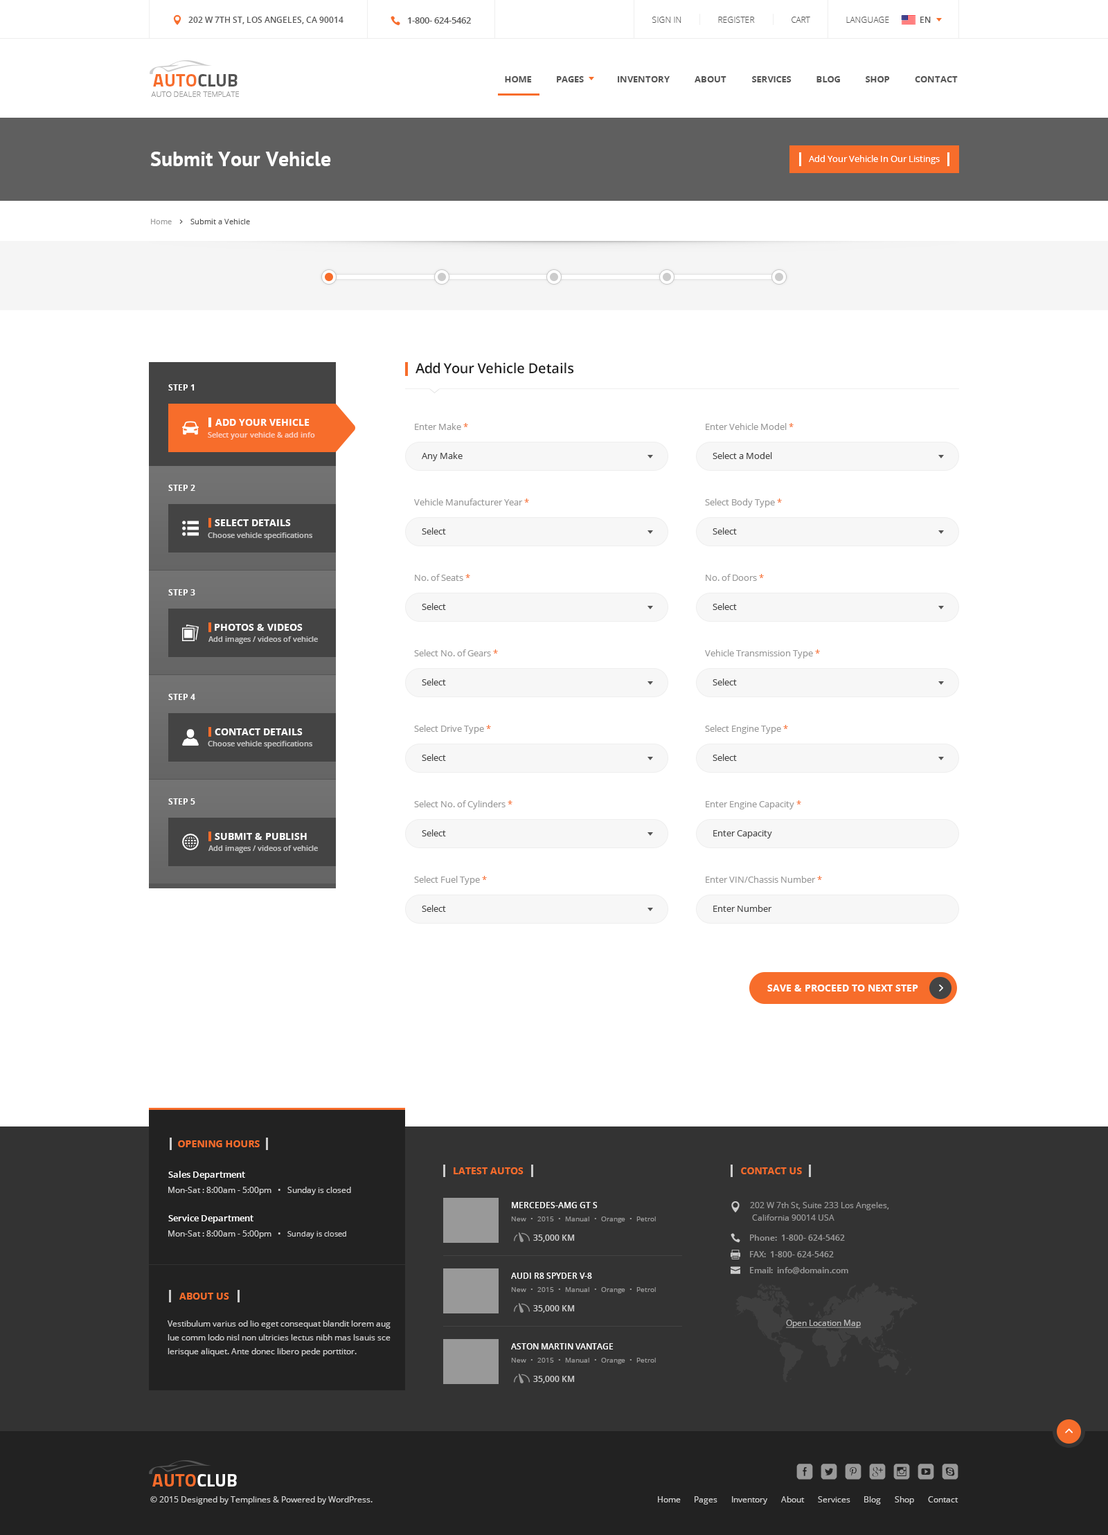
<style>
.page{position:relative;width:1108px;height:1535px;background:#ffffff}
.page>*{position:absolute;margin:0}
.t1{font:8.3px "OpenSans-Semibold";color:#555555}
.t2{font:9px "OpenSans-Semibold";color:#555555}
.t3{font:8.3px "OpenSans-Light";color:#555555}
.t4{font:18px "Titillium-Bold";color:#f76d2b}
.t5{font:18px "Titillium-Bold";color:#545454}
.t6{font:9px "OpenSans-Bold";color:#555555}
.t7{font:7.6px "OpenSans-Light";color:#999999}
.t8{font:20.8px "PTSans-Bold";color:#ffffff}
.t9{font:9px "OpenSans";color:#ffffff}
.t10{font:7.6px "OpenSans";color:#999999}
.t11{font:7.6px "OpenSans";color:#545454}
.t12{font:13.8px "OpenSans-Semibold";letter-spacing:-0.02em;color:#212121}
.t13{font:8.3px "OpenSans-Bold";color:#ffffff}
.t14{font:9.7px "OpenSans-Bold";color:#ffffff;text-transform:uppercase}
.t15{font:9px "OpenSans";color:#999999}
.t16{font:9px "OpenSans";color:#f76d2b}
.t17{font:7.6px "OpenSans-Semibold";color:#fccdbe}
.t18{font:9px "OpenSans";color:#444444}
.t19{font:7.6px "OpenSans-Semibold";color:#c3c3c3}
.t20{font:9.7px "OpenSans-Bold";color:#f76d2b}
.t21{font:9.7px "OpenSans-Bold";color:#f76c2b}
.t22{font:9px "OpenSans-Semibold";color:#ffffff}
.t23{font:8.3px "OpenSans";color:#cccccc}
.t24{font:8.3px "OpenSans-Semibold";color:#ffffff}
.t25{font:8.3px/12.5px "OpenSans";color:#999999}
.t26{font:6.9px "OpenSans";color:#999999}
.t27{font:7.6px "OpenSans";color:#cccccc}
.t28{font:8.3px "OpenSans-Semibold";color:#cccccc}
.t29{font:8.3px "OpenSans-Semibold";color:#999999}
.t30{font:8.3px/13.7px "OpenSans";color:#cccccc}
.t31{font:8.3px "OpenSans";color:#bababa;text-decoration:underline}
.t32{font:18px "Titillium-Bold";color:#f76c2b}
.t33{font:18px "Titillium-Bold";color:#ffffff}
</style>
<div class="page">
<p class="t1" style="left:188px;top:17px;width:155px;height:7px">202 W 7TH ST, LOS ANGELES, CA 90014</p>
<p class="t2" style="left:408px;top:17px;width:63px;height:7px">1-800- 624-5462</p>
<p class="t3" style="left:652px;top:17px;width:29px;height:6px">SIGN IN</p>
<p class="t3" style="left:718px;top:17px;width:37px;height:6px">REGISTER</p>
<p class="t3" style="left:791px;top:17px;width:19px;height:6px">CART</p>
<p class="t3" style="left:846px;top:17px;width:43px;height:6px">LANGUAGE</p>
<p class="t1" style="left:920px;top:17px;width:10px;height:6px">EN</p>
<p class="t4" style="left:153px;top:74px;width:84px;height:13px">AUTO<span class="t5">CLUB</span></p>
<p class="t6" style="left:505px;top:76px;width:27px;height:6px">HOME</p>
<p class="t6" style="left:557px;top:76px;width:27px;height:6px">PAGES</p>
<p class="t6" style="left:618px;top:76px;width:51px;height:6px">INVENTORY</p>
<p class="t6" style="left:694px;top:76px;width:32px;height:6px">ABOUT</p>
<p class="t6" style="left:752px;top:76px;width:39px;height:6px">SERVICES</p>
<p class="t6" style="left:816px;top:76px;width:24px;height:6px">BLOG</p>
<p class="t6" style="left:865px;top:76px;width:25px;height:6px">SHOP</p>
<p class="t6" style="left:915px;top:76px;width:42px;height:6px">CONTACT</p>
<p class="t7" style="left:151px;top:91px;width:88px;height:6px">AUTO DEALER TEMPLATE</p>
<p class="t8" style="left:150px;top:152px;width:181px;height:14px">Submit Your Vehicle</p>
<p class="t9" style="left:809px;top:155px;width:130px;height:9px">Add Your Vehicle In Our Listings</p>
<p class="t10" style="left:151px;top:219px;width:21px;height:5px">Home</p>
<p class="t11" style="left:190px;top:219px;width:60px;height:5px">Submit a Vehicle</p>
<p class="t12" style="left:415px;top:362px;width:159px;height:12px">Add Your Vehicle Details</p>
<p class="t13" style="left:168px;top:384px;width:27px;height:6px">STEP 1</p>
<p class="t14" style="left:215px;top:419px;width:94px;height:7px">Add YOUR Vehicle</p>
<p class="t15" style="left:415px;top:423px;width:53px;height:7px">Enter Make <span class="t16">*</span></p>
<p class="t15" style="left:705px;top:423px;width:88px;height:7px">Enter Vehicle Model <span class="t16">*</span></p>
<p class="t17" style="left:208px;top:432px;width:107px;height:8px">Select your vehicle &amp; add info</p>
<p class="t18" style="left:422px;top:452px;width:40px;height:9px">Any Make</p>
<p class="t18" style="left:712px;top:452px;width:60px;height:7px">Select a Model</p>
<p class="t13" style="left:168px;top:485px;width:27px;height:6px">STEP 2</p>
<p class="t15" style="left:414px;top:498px;width:115px;height:7px">Vehicle Manufacturer Year <span class="t16">*</span></p>
<p class="t15" style="left:705px;top:498px;width:77px;height:9px">Select Body Type <span class="t16">*</span></p>
<p class="t14" style="left:215px;top:519px;width:76px;height:7px">select details</p>
<p class="t19" style="left:208px;top:532px;width:104px;height:8px">Choose vehicle specifications</p>
<p class="t18" style="left:422px;top:528px;width:24px;height:6px">Select</p>
<p class="t18" style="left:712px;top:528px;width:25px;height:6px">Select</p>
<p class="t15" style="left:415px;top:574px;width:55px;height:7px">No. of Seats <span class="t16">*</span></p>
<p class="t15" style="left:705px;top:574px;width:59px;height:7px">No. of Doors <span class="t16">*</span></p>
<p class="t13" style="left:168px;top:589px;width:27px;height:6px">STEP 3</p>
<p class="t18" style="left:422px;top:603px;width:24px;height:7px">Select</p>
<p class="t18" style="left:712px;top:603px;width:25px;height:7px">Select</p>
<p class="t14" style="left:215px;top:624px;width:88px;height:7px">Photos &amp; videos</p>
<p class="t19" style="left:208px;top:636px;width:110px;height:8px">Add images / videos of vehicle</p>
<p class="t15" style="left:414px;top:649px;width:84px;height:7px">Select No. of Gears <span class="t16">*</span></p>
<p class="t15" style="left:705px;top:649px;width:115px;height:9px">Vehicle Transmission Type <span class="t16">*</span></p>
<p class="t18" style="left:422px;top:678px;width:24px;height:7px">Select</p>
<p class="t18" style="left:712px;top:678px;width:25px;height:7px">Select</p>
<p class="t13" style="left:168px;top:694px;width:27px;height:6px">STEP 4</p>
<p class="t15" style="left:414px;top:725px;width:77px;height:9px">Select Drive Type <span class="t16">*</span></p>
<p class="t15" style="left:705px;top:725px;width:83px;height:9px">Select Engine Type <span class="t16">*</span></p>
<p class="t14" style="left:215px;top:728px;width:88px;height:7px">Contact details</p>
<p class="t19" style="left:208px;top:741px;width:104px;height:7px">Choose vehicle specifications</p>
<p class="t18" style="left:422px;top:754px;width:24px;height:7px">Select</p>
<p class="t18" style="left:712px;top:754px;width:25px;height:7px">Select</p>
<p class="t13" style="left:168px;top:798px;width:27px;height:6px">STEP 5</p>
<p class="t15" style="left:414px;top:800px;width:98px;height:9px">Select No. of Cylinders <span class="t16">*</span></p>
<p class="t15" style="left:705px;top:800px;width:96px;height:9px">Enter Engine Capacity <span class="t16">*</span></p>
<p class="t14" style="left:215px;top:833px;width:92px;height:7px">SUBMIT &amp; PUBLISH</p>
<p class="t18" style="left:422px;top:829px;width:24px;height:7px">Select</p>
<p class="t18" style="left:713px;top:830px;width:59px;height:8px">Enter Capacity</p>
<p class="t19" style="left:208px;top:845px;width:110px;height:8px">Add images / videos of vehicle</p>
<p class="t15" style="left:414px;top:876px;width:73px;height:9px">Select Fuel Type <span class="t16">*</span></p>
<p class="t15" style="left:705px;top:876px;width:117px;height:7px">Enter VIN/Chassis Number <span class="t16">*</span></p>
<p class="t18" style="left:422px;top:905px;width:24px;height:7px">Select</p>
<p class="t18" style="left:713px;top:905px;width:59px;height:7px">Enter Number</p>
<p class="t14" style="left:767px;top:984px;width:151px;height:7px">Save &amp; PROCEED to next step</p>
<p class="t20" style="left:178px;top:1140px;width:82px;height:7px">OPENING HOURS</p>
<p class="t21" style="left:453px;top:1167px;width:70px;height:7px">LATEST AUTOS</p>
<p class="t21" style="left:741px;top:1167px;width:61px;height:7px">CONTACT US</p>
<p class="t22" style="left:168px;top:1171px;width:77px;height:9px">Sales Department</p>
<p class="t23" style="left:168px;top:1187px;width:183px;height:8px">Mon-Sat : 8:00am - 5:00pm   •   Sunday is closed</p>
<p class="t24" style="left:512px;top:1202px;width:85px;height:6px">MERCEDES-AMG GT S</p>
<p class="t25" style="left:750px;top:1202px;width:139px;height:19px">202 W 7th St, Suite 233 Los Angeles,<br> California 90014 USA</p>
<p class="t22" style="left:168px;top:1214px;width:85px;height:9px">Service Department</p>
<p class="t26" style="left:511px;top:1216px;width:145px;height:7px">New  •  2015  •  Manual  •  Orange  •  Petrol</p>
<p class="t23" style="left:168px;top:1230px;width:178px;height:9px">Mon-Sat : 8:00am - 5:00pm   •   <span class="t27">Sunday is closed</span></p>
<p class="t28" style="left:533px;top:1234px;width:42px;height:8px">35,000 KM</p>
<p class="t29" style="left:750px;top:1234px;width:95px;height:7px">Phone:  1-800- 624-5462</p>
<p class="t29" style="left:750px;top:1251px;width:84px;height:6px">FAX:  1-800- 624-5462</p>
<p class="t24" style="left:511px;top:1272px;width:81px;height:7px">AUDI R8 SPYDER V-8</p>
<p class="t29" style="left:750px;top:1267px;width:98px;height:7px">Email:  info@domain.com</p>
<p class="t26" style="left:511px;top:1287px;width:145px;height:6px">New  •  2015  •  Manual  •  Orange  •  Petrol</p>
<p class="t20" style="left:179px;top:1293px;width:50px;height:6px">ABOUT US</p>
<p class="t28" style="left:533px;top:1305px;width:42px;height:8px">35,000 KM</p>
<p class="t30" style="left:168px;top:1320px;width:222px;height:36px">Vestibulum varius od lio eget consequat blandit lorem aug<br>lue comm lodo nisl non ultricies lectus nibh mas lsauis sce<br>lerisque aliquet. Ante donec libero pede porttitor.</p>
<p class="t31" style="left:786px;top:1320px;width:75px;height:8px">Open Location Map</p>
<p class="t24" style="left:511px;top:1343px;width:102px;height:6px">ASTON MARTIN VANTAGE</p>
<p class="t26" style="left:511px;top:1358px;width:145px;height:6px">New  •  2015  •  Manual  •  Orange  •  Petrol</p>
<p class="t28" style="left:533px;top:1376px;width:42px;height:7px">35,000 KM</p>
<p class="t32" style="left:152px;top:1474px;width:85px;height:12px">AUTO<span class="t33">CLUB</span></p>
<p class="t23" style="left:150px;top:1496px;width:222px;height:8px">© 2015 Designed by Templines &amp; Powered by WordPress.</p>
<p class="t23" style="left:658px;top:1496px;width:23px;height:6px">Home</p>
<p class="t23" style="left:694px;top:1496px;width:23px;height:8px">Pages</p>
<p class="t23" style="left:732px;top:1496px;width:35px;height:8px">Inventory</p>
<p class="t23" style="left:781px;top:1496px;width:23px;height:6px">About</p>
<p class="t23" style="left:818px;top:1496px;width:32px;height:6px">Services</p>
<p class="t23" style="left:864px;top:1496px;width:17px;height:8px">Blog</p>
<p class="t23" style="left:894px;top:1496px;width:20px;height:8px">Shop</p>
<p class="t23" style="left:928px;top:1496px;width:30px;height:6px">Contact</p>
</div>
